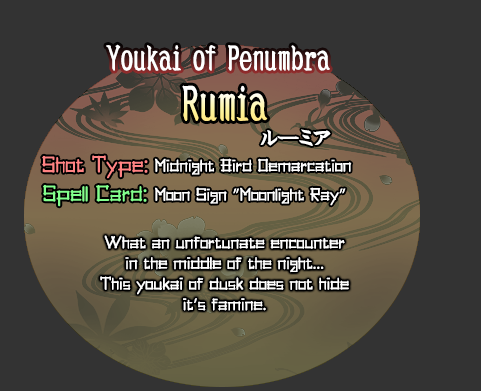
<style>
.page{position:relative;width:481px;height:391px;background:#333333}
.page>*{position:absolute;margin:0}
.t1{font:34.7px "DCLeiKaiSho-W5-WING-RKSJ-H";color:#ffffff}
.t2{font:48px "DCLeiKaiSho-W5-WING-RKSJ-H"}
.t3{font:24px "DCLeiKaiSho-W5-WING-RKSJ-H";color:#ffffff}
.t4{font:24px "PickupStixRegular";color:#ff8383}
.t5{font:18.7px "PickupStixRegular";color:#ffffff}
.t6{font:24px "PickupStixRegular";color:#83ff8c}
</style>
<div class="page">
<p class="t1" style="left:106px;top:44px;width:224px;height:27px">Youkai of Penumbra</p>
<p class="t2" style="left:182px;top:85px;width:86px;height:36px">Rumia</p>
<p class="t3" style="left:260px;top:129px;width:71px;height:17px">ルーミア</p>
<p class="t4" style="left:42px;top:155px;width:106px;height:24px">Shot Type:</p>
<p class="t5" style="left:155px;top:158px;width:197px;height:17px">Midnight Bird Demarcation</p>
<p class="t6" style="left:43px;top:184px;width:104px;height:23px">Spell Card:</p>
<p class="t5" style="left:155px;top:187px;width:191px;height:19px">Moon Sign "Moonlight Ray"</p>
<p class="t5" style="left:100px;top:235px;width:249px;height:76px;text-align:center">What an unfortunate encounter<br>in the middle of the night...<br>This youkai of dusk does not hide<br>it’s famine.</p>
</div>
